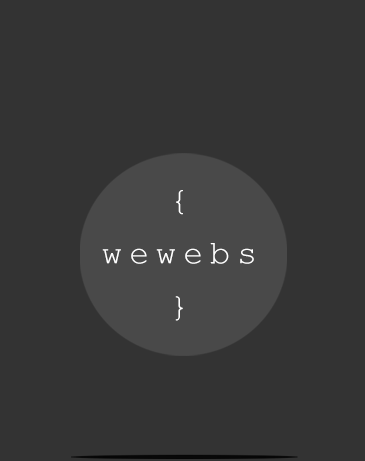
<style>
.page{position:relative;width:365px;height:461px;background:#333333}
.page>*{position:absolute;margin:0}
.t1{font:32.8px/53.1px "CourierNewPSMT";letter-spacing:0.2em;color:#ffffff}
.t2{font:32.8px/53.1px "CourierNewPSMT";letter-spacing:0.1em;color:#ffffff;text-transform:uppercase}
</style>
<div class="page">
<p class="t1" style="left:102px;top:190px;width:152px;height:131px;text-align:center"><span class="t2">{<br></span>wewebs<br><span class="t2">}</span></p>
</div>
